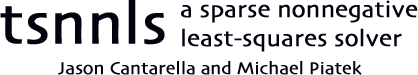
<style>
.page{position:relative;width:418px;height:75px;background:#ffffff}
.page>*{position:absolute;margin:0}
.t1{font:60px "Skia-Regular";color:#01030f;font-weight:bold}
.t2{font:24px "Skia-Regular";color:#01030f;font-weight:bold}
.t3{font:18px "Skia-Regular";color:#01030f;font-weight:bold}
</style>
<div class="page">
<p class="t1" style="left:0px;top:0px;width:165px;height:45px">tsnnls</p>
<p class="t2" style="left:181px;top:0px;width:237px;height:52px">a sparse nonnegative<br>least-squares solver</p>
<p class="t3" style="left:58px;top:61px;width:304px;height:14px">Jason Cantarella and Michael Piatek</p>
</div>
